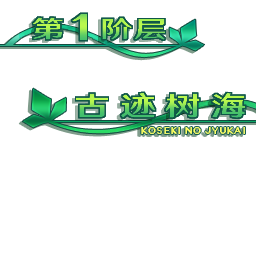
<style>
.page{position:relative;width:256px;height:256px;background:#ffffff}
.page>*{position:absolute;margin:0}
.t1{font:24px "HYWenHei-HEW";letter-spacing:0.052em;scale:1.36 1}
.t2{font:36.6px "HYWenHei-HEW";letter-spacing:0.052em;scale:1.36 1}
.t3{font:27.1px "HYWenHei-HEW";letter-spacing:0.271em;scale:1.33 1}
</style>
<div class="page">
<p class="t1" style="left:32px;top:17px;width:133px;height:23px">第   阶层</p>
<p class="t2" style="left:71px;top:13px;width:16px;height:28px">1</p>
<p class="t3" style="left:76px;top:92px;width:170px;height:26px">古迹树海</p>
</div>
